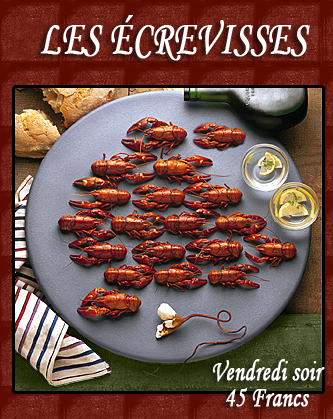
<style>
.page{position:relative;width:333px;height:419px}
.page>*{position:absolute;margin:0}
.t1{font:48px "MonotypeCorsiva";color:#ffffff;font-weight:bold;scale:0.73 1}
.t2{font:30.2px "MonotypeCorsiva";color:#ffffff;font-weight:bold;scale:0.73 1}
</style>
<div class="page">
<p class="t1" style="left:40px;top:15px;width:270px;height:46px">LES ÉCREVISSES</p>
<p class="t2" style="left:212px;top:359px;width:113px;height:48px;text-align:center">Vendredi soir<br>45 Francs</p>
</div>
